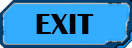
<style>
.page{position:relative;width:132px;height:48px;background:#33adff}
.page>*{position:absolute;margin:0}
.t1{font:30px "BritannicBold";color:#000000}
</style>
<div class="page">
<p class="t1" style="left:36px;top:14px;width:58px;height:20px">EXIT</p>
</div>
